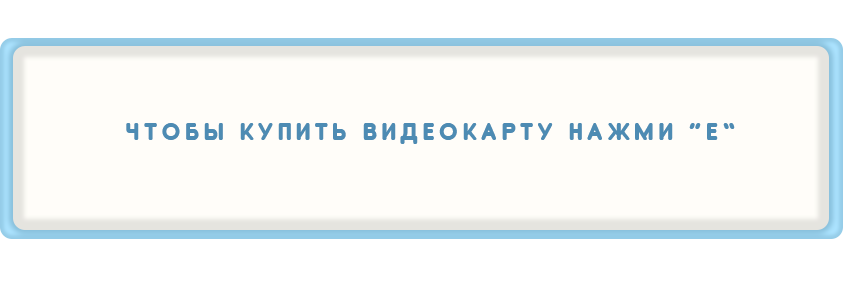
<style>
.page{position:relative;width:843px;height:307px;background:#fffdf9}
.page>*{position:absolute;margin:0}
.t1{font:25px "OvalCyr-Normal";letter-spacing:0.18em;color:#4d8bb3}
</style>
<div class="page">
<p class="t1" style="left:126px;top:123px;width:609px;height:21px">ЧТОБЫ КУПИТЬ ВИДЕОКАРТУ НАЖМИ “E”</p>
</div>
